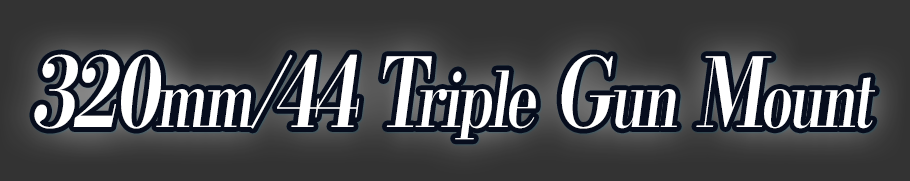
<style>
.page{position:relative;width:910px;height:181px;background:#333333}
.page>*{position:absolute;margin:0}
.t1{font:96px "KochoStd-Heavy";letter-spacing:-0.05em;color:#ffffff;font-style:italic;scale:0.75 1}
.t2{font:76.8px "KochoStd-Heavy";letter-spacing:-0.05em;color:#ffffff;font-style:italic;scale:0.75 1}
</style>
<div class="page">
<p class="t1" style="left:34px;top:54px;width:841px;height:86px">320<span class="t2">mm</span>/44 T<span class="t2">riple</span> G<span class="t2">un</span> M<span class="t2">ount</span></p>
</div>
